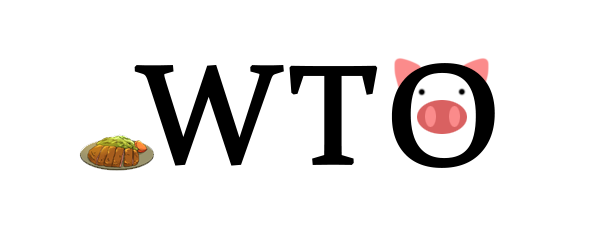
<style>
.page{position:relative;width:600px;height:240px;background:#ffffff}
.page>*{position:absolute;margin:0}
.t1{font:140px "Constantia";letter-spacing:0.05em;color:#000000;font-weight:bold}
</style>
<div class="page">
<p class="t1" style="left:134px;top:63px;width:361px;height:105px">WTO</p>
</div>
